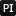
<style>
.page{position:relative;width:16px;height:16px}
.page>*{position:absolute;margin:0}
.t1{font:11.3px "Tahoma";color:#ffffff}
</style>
<div class="page">
<p class="t1" style="left:3px;top:4px;width:10px;height:8px">PI</p>
</div>
